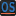
<style>
.page{position:relative;width:16px;height:16px;background:#242424}
.page>*{position:absolute;margin:0}
.t1{font:13.2px "Raleway-SemiBold";letter-spacing:0.075em;color:#2c77ba;text-transform:uppercase;scale:0.72 1}
</style>
<div class="page">
<p class="t1" style="left:1px;top:2px;width:14px;height:10px">OS</p>
</div>
